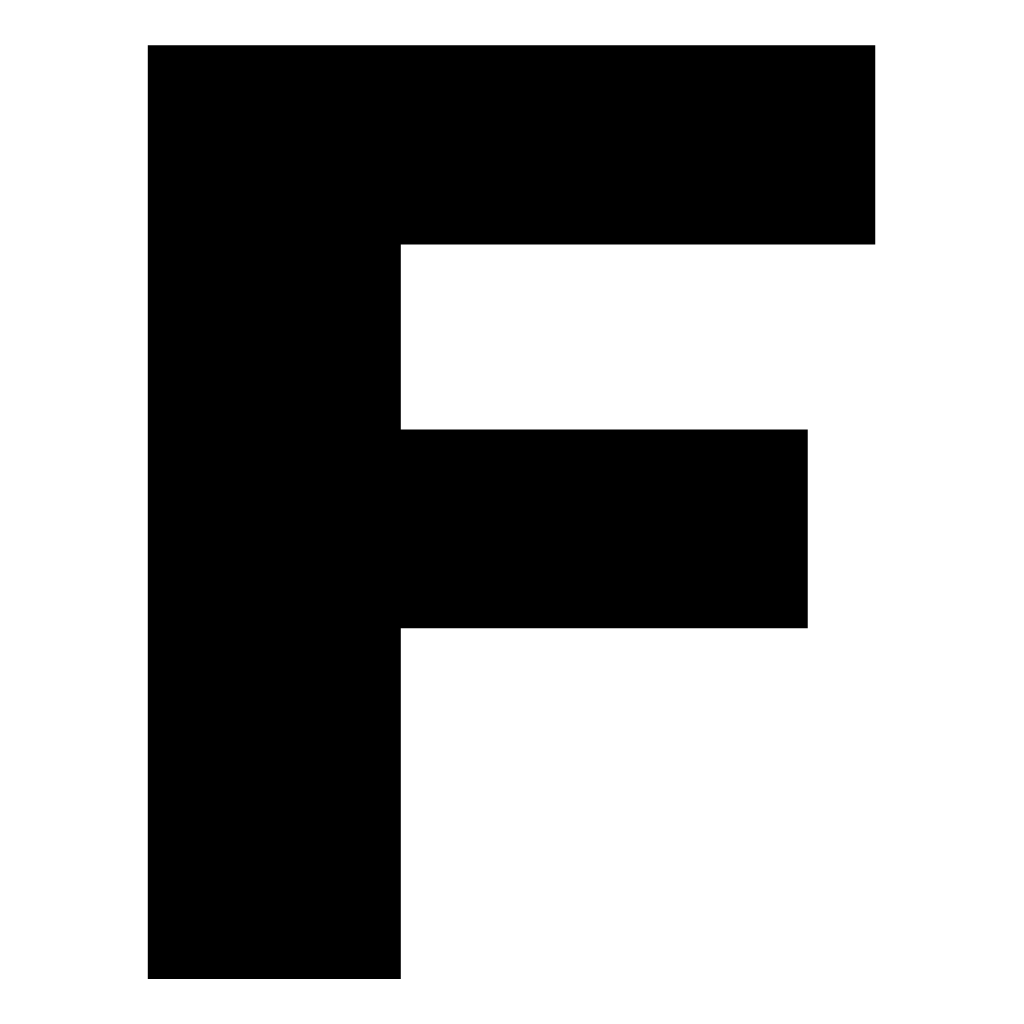
<style>
.page{position:relative;width:1024px;height:1024px;background:#ffffff}
.page>*{position:absolute;margin:0}
.t1{font:1261.9px "EncodeSansSemiExpanded-ExtraBold";color:#000000}
</style>
<div class="page">
<p class="t1" style="left:147px;top:45px;width:729px;height:934px">F</p>
</div>
